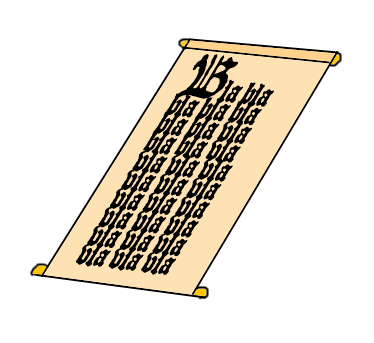
<style>
.page{position:relative;width:374px;height:343px;background:#ffffff}
.page>*{position:absolute;margin:0}
.t1{font:36.7px/10.9px "JSL-Blackletter";letter-spacing:-0.009em;color:#000000;scale:0.73 1}
.t2{font:75.3px/10.9px "JSL-Blackletter";letter-spacing:-0.009em;color:#000000;scale:0.73 1}
</style>
<div class="page">
<p class="t1" style="left:76px;top:54px;width:198px;height:221px;rotate:7deg"><span class="t2">B</span>la bla<br><br>bla bla bla<br><br>bla bla vla<br><br>bla bla vla<br><br>vla vla vla<br><br>vla vla vla<br><br>vla vla vla<br><br>vla vla vla<br><br>vla vla vla<br><br>vla vla vla</p>
</div>
